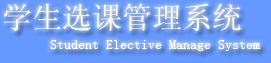
<style>
.page{position:relative;width:271px;height:63px;background:#6699ff}
.page>*{position:absolute;margin:0}
.t1{font:30px "SimSun";color:#ffffff}
.t2{font:14px "SimSun";color:#ffffff}
</style>
<div class="page">
<p class="t1" style="left:3px;top:3px;width:238px;height:29px">学生选课管理系统</p>
<p class="t2" style="left:50px;top:40px;width:211px;height:11px">Student Elective Manage System</p>
</div>
